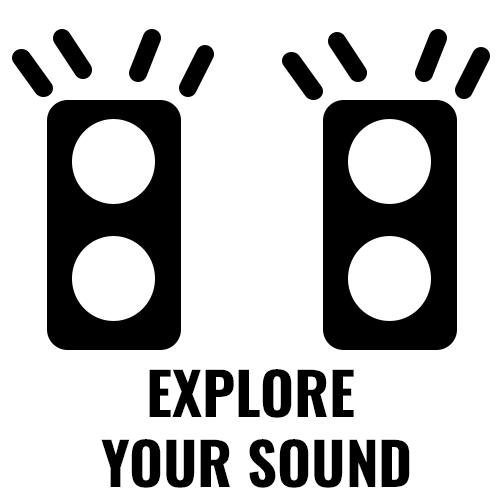
<style>
.page{position:relative;width:500px;height:500px;background:#ffffff}
.page>*{position:absolute;margin:0}
.t1{font:58.3px "Oswald-Bold";color:#000000}
</style>
<div class="page">
<p class="t1" style="left:101px;top:369px;width:309px;height:119px">EXPLORE <br>YOUR SOUND</p>
</div>
